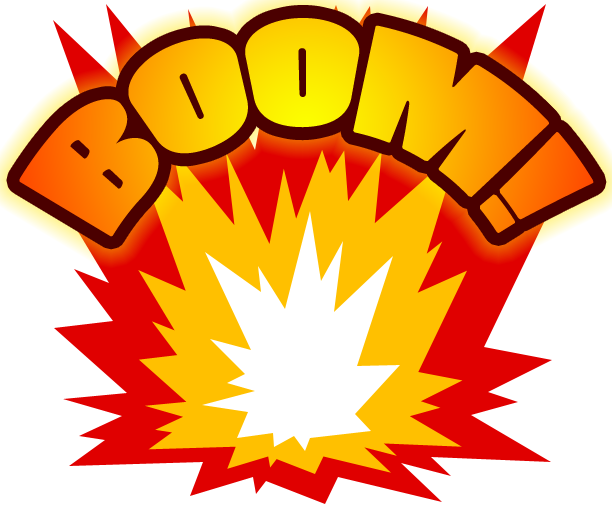
<style>
.page{position:relative;width:612px;height:512px;background:#ffffff}
.page>*{position:absolute;margin:0}
.t1{font:145px "PoplarStd"}
</style>
<div class="page">
<p class="t1" style="left:19px;top:18px;width:575px;height:219px">BOOM!</p>
</div>
